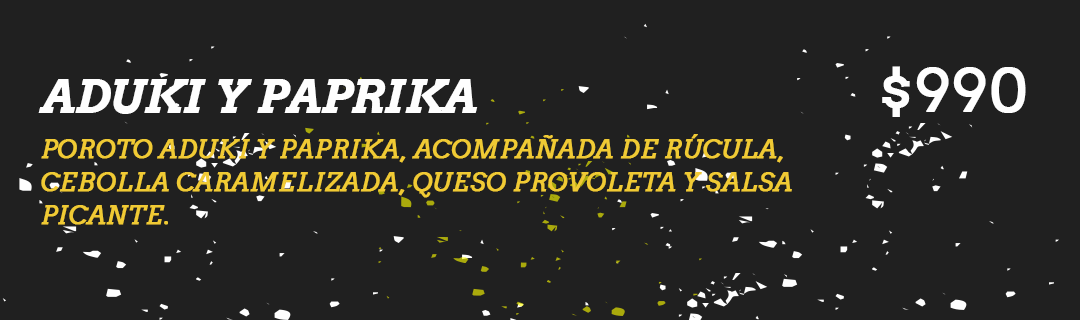
<style>
.page{position:relative;width:1080px;height:320px;background:#202020}
.page>*{position:absolute;margin:0}
.t1{font:58.3px "Arvo";color:#fefefe;font-weight:bold}
.t2{font:45.8px "Arvo-BoldItalic";color:#fefefe;text-transform:uppercase}
.t3{font:25px/33.3px "Arvo-Italic";color:#f0ca34;text-transform:uppercase;font-weight:bold}
</style>
<div class="page">
<p class="t1" style="left:882px;top:66px;width:144px;height:51px">$990</p>
<p class="t2" style="left:38px;top:79px;width:440px;height:35px">aduki y paprika</p>
<p class="t3" style="left:41px;top:134px;width:751px;height:91px">poroto aduki y paprika, acompañada de rúcula, cebolla caramelizada, queso provoleta y salsa picante.</p>
</div>
